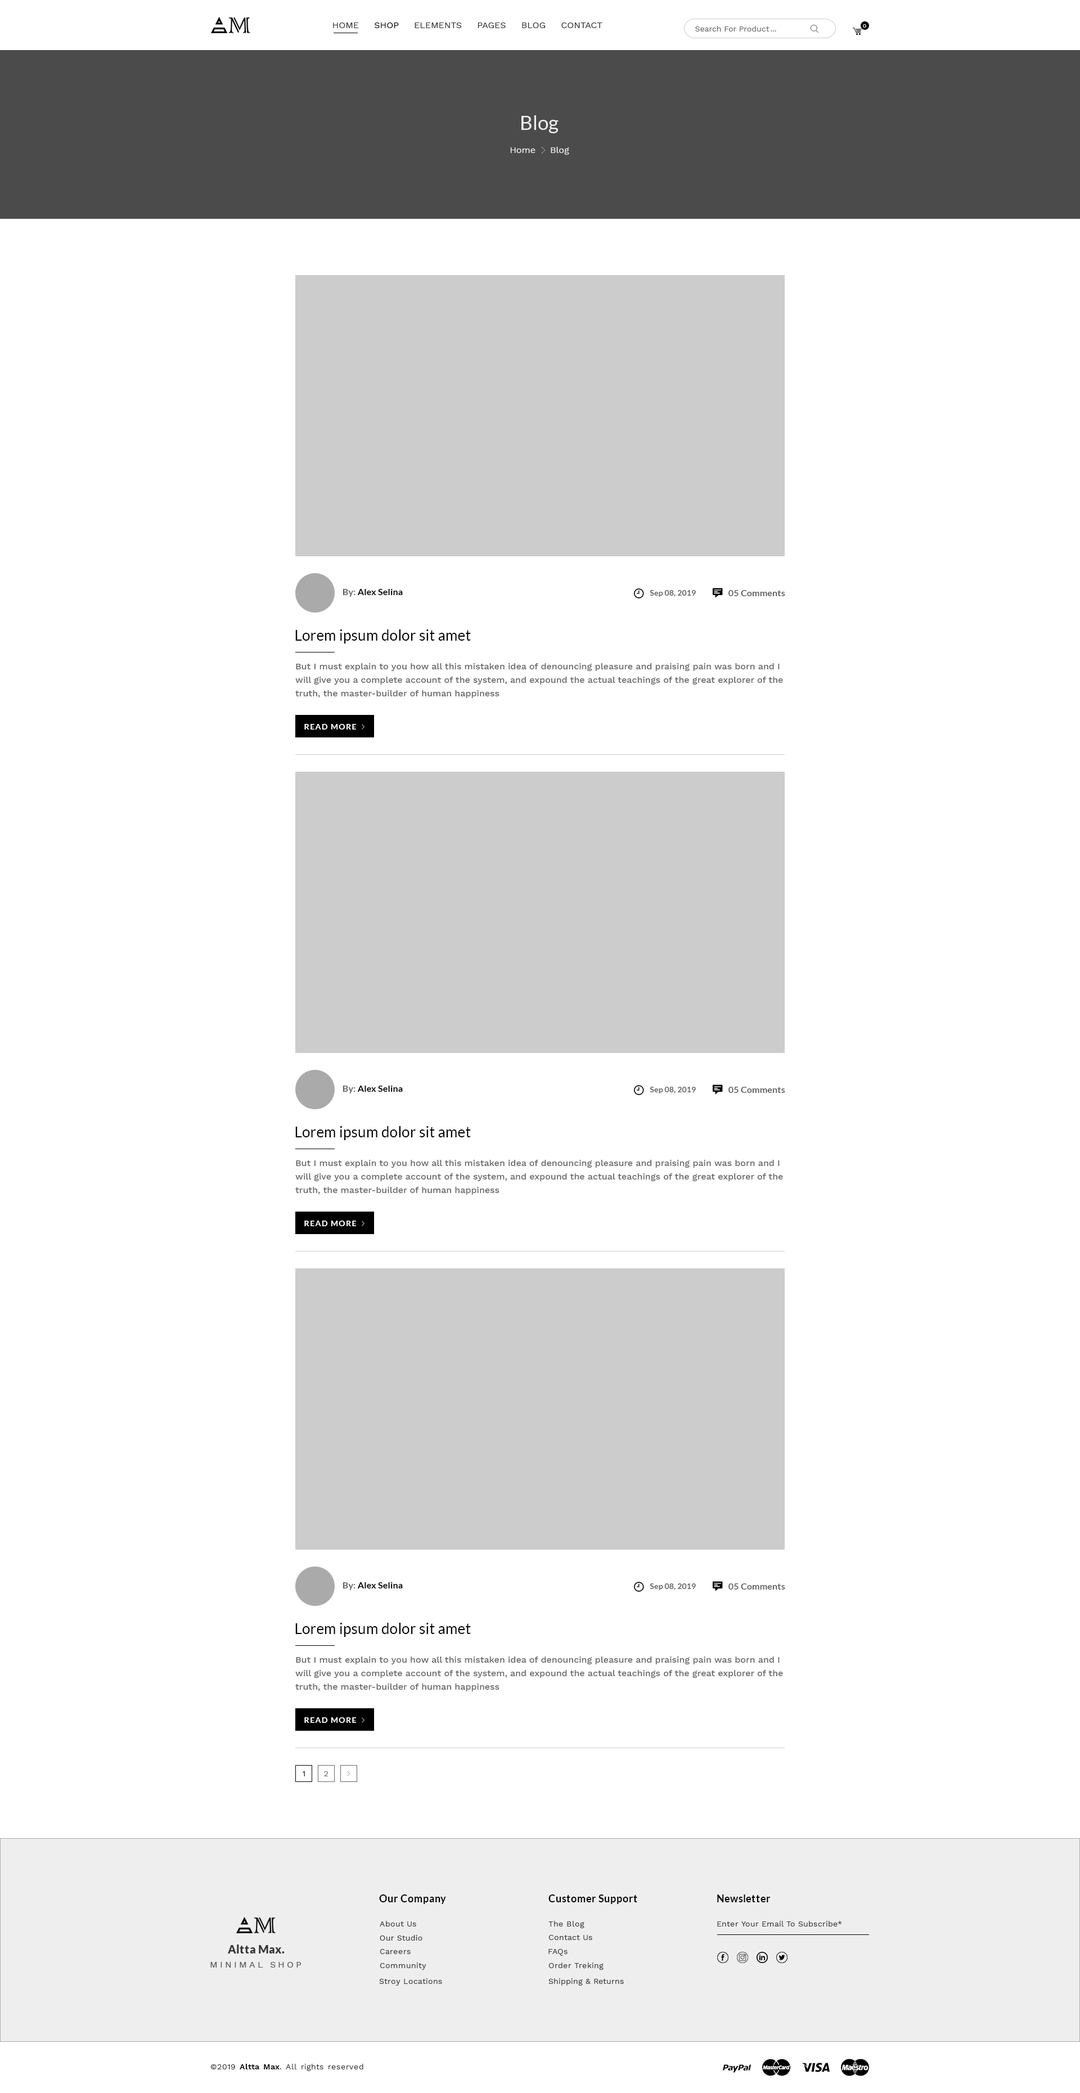
<style>
.page{position:relative;width:1080px;height:2093px;background:#ffffff}
.page>*{position:absolute;margin:0}
.t1{font:9px "WorkSans-Regular";color:#333333}
.t2{font:9px "WorkSans-Regular";color:#000000}
.t3{font:7.9px "WorkSans-Regular";color:#666666}
.t4{font:5.6px "WorkSans-Regular";color:#ffffff}
.t5{font:19.7px "Lato-Regular";color:#eeeeee}
.t6{font:9px "WorkSans-Regular";color:#eeeeee}
.t7{font:9px "Lato-Bold";letter-spacing:0.01em;color:#000000}
.t8{font:9px "Lato-Bold";letter-spacing:0.01em;color:#666666}
.t9{font:7.9px "Lato-Bold";letter-spacing:0.01em;color:#666666}
.t10{font:9px "Lato-Bold";letter-spacing:0.01em;color:#333333}
.t11{font:14.6px "Lato-Regular";letter-spacing:0.01em;color:#000000}
.t12{font:9px/13.5px "WorkSans-Medium";color:#666666}
.t13{font:7.9px "Lato-Bold";letter-spacing:0.1em;color:#ffffff}
.t14{font:7.9px "WorkSans-Regular";letter-spacing:0.1em;color:#000000}
.t15{font:7.9px "WorkSans-Regular";letter-spacing:0.1em;color:#666666}
.t16{font:10.1px "Lato-Bold";letter-spacing:0.03em;color:#000000}
.t17{font:7.9px "WorkSans-Regular";letter-spacing:0.03em;color:#333333}
.t18{font:11.3px "Lato-Black";letter-spacing:0.03em;color:#333333}
.t19{font:9px "WorkSans-Regular";letter-spacing:0.25em;color:#555555}
.t20{font:7.9px "WorkSans-SemiBold";letter-spacing:0.03em;color:#000000}
</style>
<div class="page">
<p class="t1" style="left:333px;top:23px;width:269px;height:5px">HOME     <span class="t2">SHOP</span>     ELEMENTS     PAGES     BLOG     CONTACT</p>
<p class="t3" style="left:695px;top:26px;width:75px;height:6px">Search For Product</p>
<p class="t4" style="left:863px;top:24px;width:3px;height:4px">0</p>
<p class="t3" style="left:771px;top:30px;width:5px;height:2px">...</p>
<p class="t5" style="left:521px;top:115px;width:38px;height:18px">Blog</p>
<p class="t6" style="left:510px;top:147px;width:26px;height:6px">Home</p>
<p class="t6" style="left:551px;top:147px;width:18px;height:8px">Blog</p>
<p class="t7" style="left:343px;top:589px;width:60px;height:8px"><span class="t8">By: </span>Alex Selina</p>
<p class="t9" style="left:650px;top:590px;width:46px;height:7px">Sep 08, 2019</p>
<p class="t8" style="left:728px;top:590px;width:11px;height:6px">05</p>
<p class="t8" style="left:741px;top:590px;width:44px;height:6px"><span class="t10"> </span>Comments</p>
<p class="t11" style="left:295px;top:629px;width:176px;height:15px">Lorem ipsum dolor sit amet</p>
<p class="t12" style="left:295px;top:663px;width:488px;height:35px;text-align:right">But I must explain to you how all this mistaken idea of denouncing pleasure and praising pain was born and I will give you a complete account of the system, and expound the actual teachings of the great explorer of the truth, the master-builder of human happiness</p>
<p class="t13" style="left:304px;top:724px;width:52px;height:6px">READ MORE</p>
<p class="t7" style="left:343px;top:1086px;width:60px;height:8px"><span class="t8">By: </span>Alex Selina</p>
<p class="t9" style="left:650px;top:1087px;width:46px;height:7px">Sep 08, 2019</p>
<p class="t8" style="left:728px;top:1087px;width:11px;height:6px">05</p>
<p class="t8" style="left:741px;top:1087px;width:44px;height:6px"><span class="t10"> </span>Comments</p>
<p class="t11" style="left:295px;top:1126px;width:176px;height:14px">Lorem ipsum dolor sit amet</p>
<p class="t12" style="left:295px;top:1160px;width:488px;height:35px;text-align:right">But I must explain to you how all this mistaken idea of denouncing pleasure and praising pain was born and I will give you a complete account of the system, and expound the actual teachings of the great explorer of the truth, the master-builder of human happiness</p>
<p class="t13" style="left:304px;top:1221px;width:52px;height:5px">READ MORE</p>
<p class="t7" style="left:343px;top:1582px;width:60px;height:8px"><span class="t8">By: </span>Alex Selina</p>
<p class="t9" style="left:650px;top:1583px;width:46px;height:7px">Sep 08, 2019</p>
<p class="t8" style="left:728px;top:1583px;width:11px;height:7px">05</p>
<p class="t8" style="left:741px;top:1583px;width:44px;height:7px"><span class="t10"> </span>Comments</p>
<p class="t11" style="left:295px;top:1623px;width:176px;height:14px">Lorem ipsum dolor sit amet</p>
<p class="t12" style="left:295px;top:1657px;width:488px;height:34px;text-align:right">But I must explain to you how all this mistaken idea of denouncing pleasure and praising pain was born and I will give you a complete account of the system, and expound the actual teachings of the great explorer of the truth, the master-builder of human happiness</p>
<p class="t13" style="left:304px;top:1717px;width:52px;height:6px">READ MORE</p>
<p class="t14" style="left:302px;top:1771px;width:3px;height:5px">1</p>
<p class="t15" style="left:324px;top:1771px;width:4px;height:5px">2</p>
<p class="t16" style="left:379px;top:1895px;width:67px;height:9px">Our Company</p>
<p class="t16" style="left:548px;top:1895px;width:89px;height:9px">Customer Support</p>
<p class="t16" style="left:717px;top:1895px;width:53px;height:7px">Newsletter</p>
<p class="t17" style="left:380px;top:1921px;width:36px;height:6px">About Us</p>
<p class="t17" style="left:548px;top:1921px;width:36px;height:7px">The Blog</p>
<p class="t17" style="left:717px;top:1921px;width:125px;height:6px">Enter Your Email To Subscribe*</p>
<p class="t17" style="left:380px;top:1935px;width:42px;height:6px">Our Studio</p>
<p class="t17" style="left:548px;top:1935px;width:44px;height:5px">Contact Us</p>
<p class="t18" style="left:228px;top:1945px;width:57px;height:9px">Altta Max.</p>
<p class="t17" style="left:380px;top:1949px;width:31px;height:5px">Careers</p>
<p class="t17" style="left:548px;top:1949px;width:20px;height:7px">FAQs</p>
<p class="t19" style="left:210px;top:1962px;width:92px;height:6px">MINIMAL SHOP</p>
<p class="t17" style="left:380px;top:1963px;width:46px;height:7px">Community</p>
<p class="t17" style="left:548px;top:1963px;width:56px;height:7px">Order Treking</p>
<p class="t17" style="left:379px;top:1978px;width:63px;height:8px">Stroy Locations</p>
<p class="t17" style="left:548px;top:1978px;width:76px;height:8px">Shipping &amp; Returns</p>
<p class="t17" style="left:210px;top:2064px;width:153px;height:7px">©2019 <span class="t20">Altta Max</span>. All rights reserved</p>
</div>
